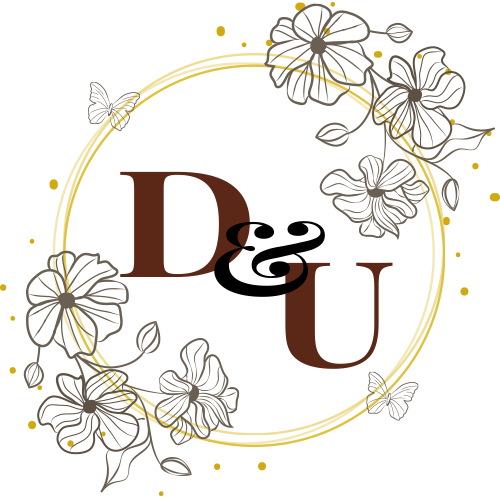
<style>
.page{position:relative;width:500px;height:500px;background:#ffffff}
.page>*{position:absolute;margin:0}
.t1{font:147.8px "PlayfairDisplay-Bold";color:#5b2818;scale:1.26 1}
.t2{font:104.7px "PlayfairDisplay-Bold";color:#000000;scale:1.26 1}
</style>
<div class="page">
<p class="t1" style="left:120px;top:171px;width:130px;height:106px">D</p>
<p class="t2" style="left:214px;top:221px;width:111px;height:76px">&amp;</p>
<p class="t1" style="left:271px;top:262px;width:122px;height:107px">U</p>
</div>
